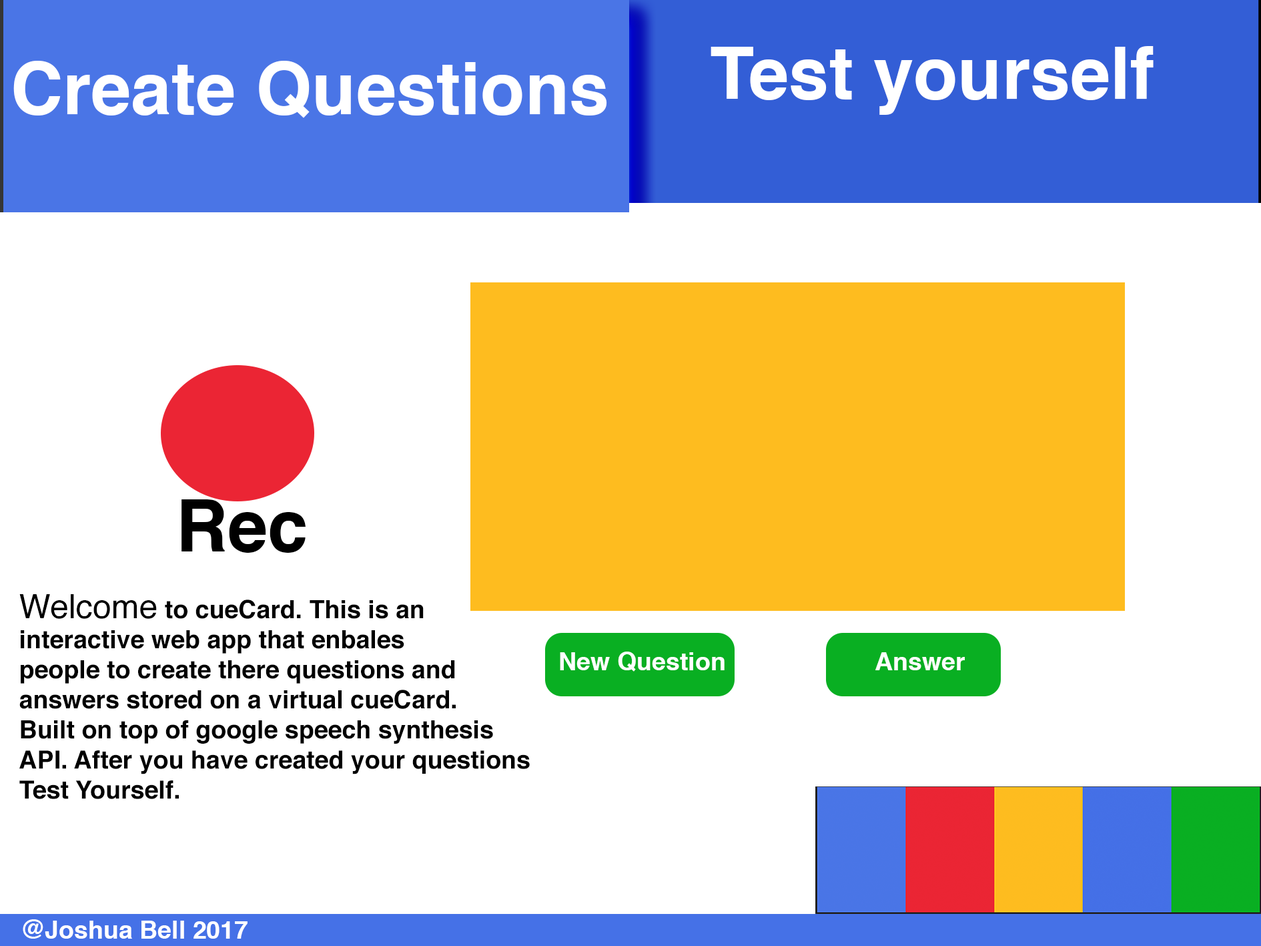
<style>
.page{position:relative;width:1261px;height:946px;background:#ffffff}
.page>*{position:absolute;margin:0}
.t1{font:72.3px "Helvetica-Bold";color:#ffffff}
.t2{font:72.3px "Helvetica-Bold";color:#000000}
.t3{font:25.1px "Helvetica-Bold";color:#000000}
.t4{font:33.4px "Helvetica";color:#000000}
.t5{font:25.1px "Helvetica-Bold";color:#ffffff}
</style>
<div class="page">
<p class="t1" style="left:711px;top:46px;width:443px;height:69px">Test yourself</p>
<p class="t1" style="left:13px;top:61px;width:594px;height:57px">Create Questions</p>
<p class="t2" style="left:181px;top:499px;width:125px;height:53px">Rec</p>
<p class="t3" style="left:19px;top:594px;width:511px;height:205px"><span class="t4">Welcome </span>to cueCard. This is an <br>interactive web app that enbales <br>people to create there questions and<br>answers stored on a virtual cueCard. <br>Built on top of google speech synthesis <br>API. After you have created your questions <br>Test Yourself.</p>
<p class="t5" style="left:560px;top:651px;width:165px;height:20px">New Question</p>
<p class="t5" style="left:875px;top:652px;width:90px;height:18px">Answer</p>
<p class="t5" style="left:23px;top:919px;width:225px;height:19px">@Joshua Bell 2017</p>
</div>
